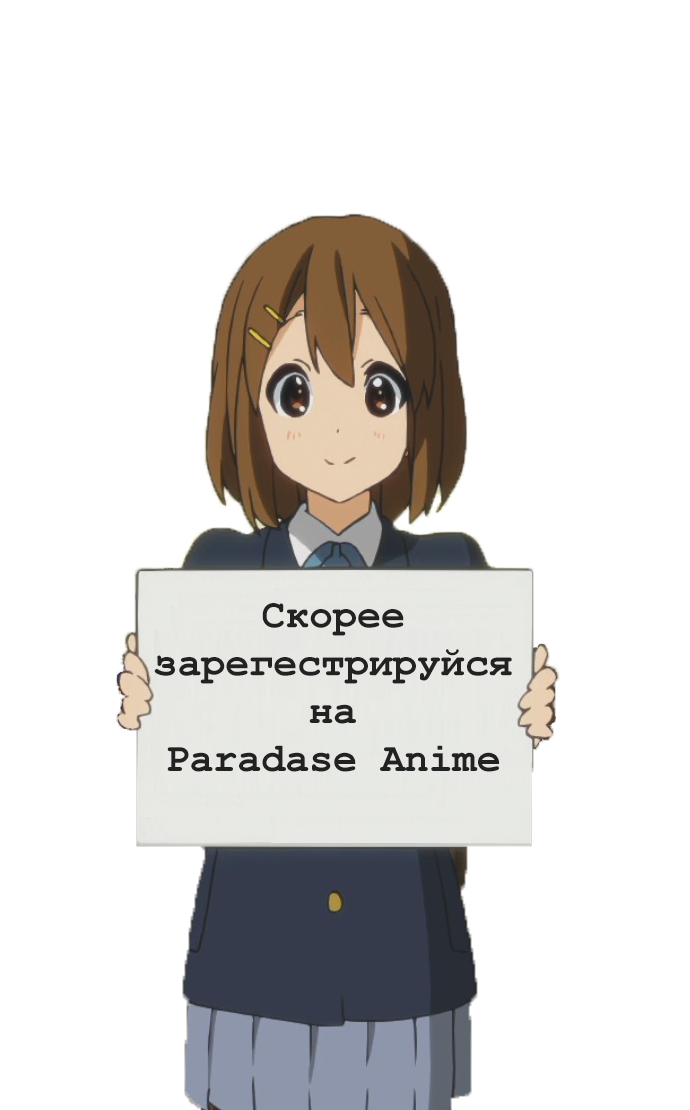
<style>
.page{position:relative;width:690px;height:1110px;background:#ffffff}
.page>*{position:absolute;margin:0}
.t1{font:39.9px "CourierNewPS-BoldMT";color:#222222}
</style>
<div class="page">
<p class="t1" style="left:154px;top:603px;width:358px;height:169px;text-align:center">Скорее <br>зарегестрируйся <br>на <br>Paradase Anime</p>
</div>
